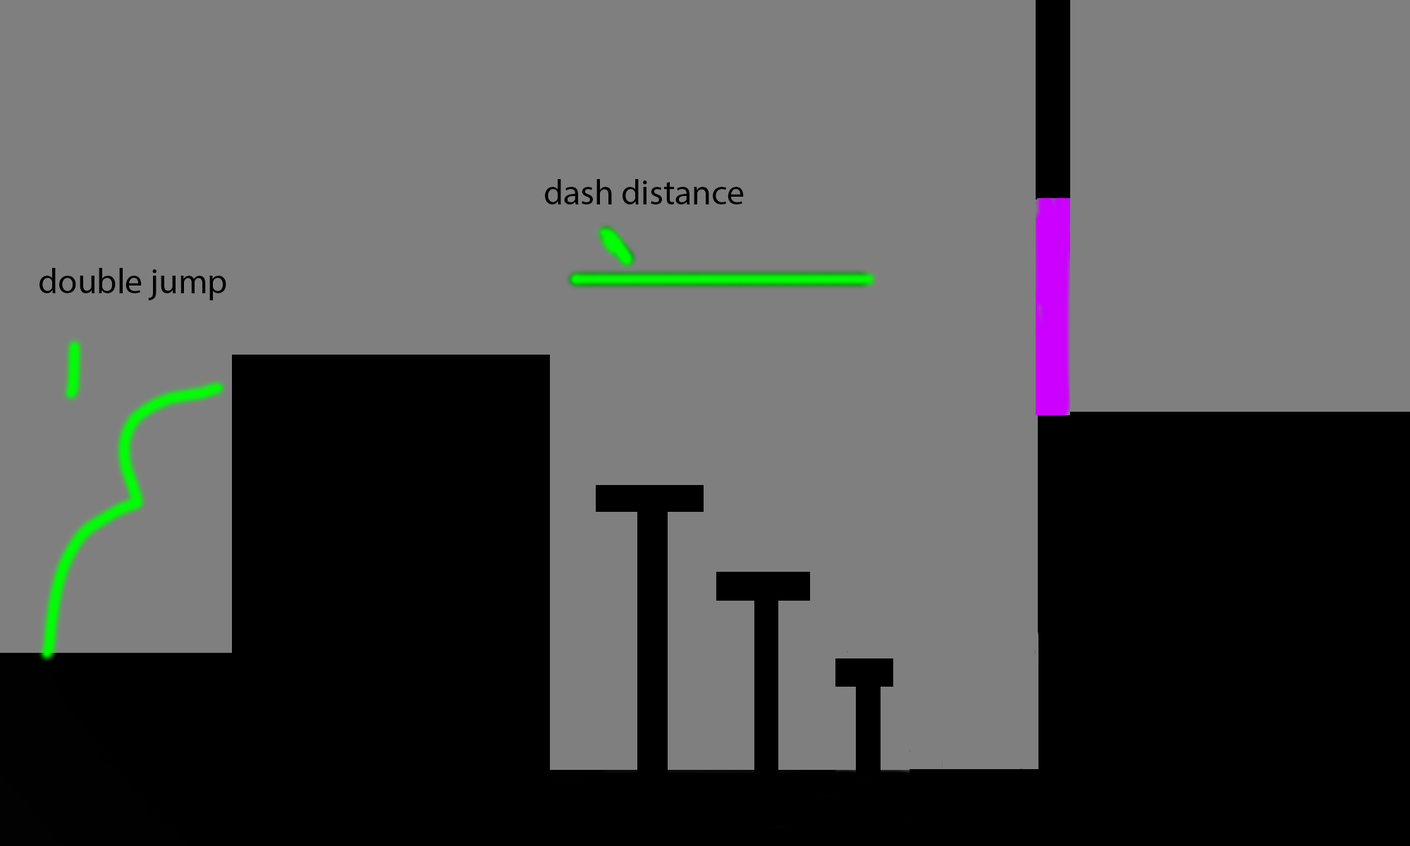
<style>
.page{position:relative;width:1410px;height:846px;background:#7f7f7f}
.page>*{position:absolute;margin:0}
.t1{font:35.2px "MyriadPro-Regular";color:#000000}
</style>
<div class="page">
<p class="t1" style="left:545px;top:179px;width:199px;height:25px">dash distance</p>
<p class="t1" style="left:39px;top:268px;width:187px;height:32px">double jump</p>
</div>
